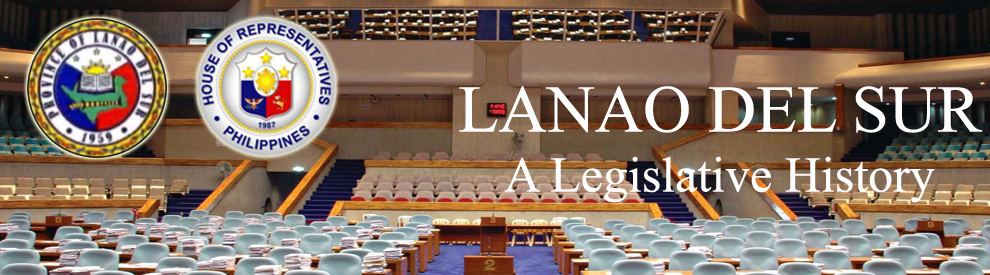
<style>
.page{position:relative;width:990px;height:275px}
.page>*{position:absolute;margin:0}
.t1{font:50px "TimesNewRomanPSMT";color:#fdfcfc}
.t2{font:66.7px "TimesNewRomanPSMT";color:#fdfdfd}
</style>
<div class="page">
<p class="t1" style="left:459px;top:86px;width:524px;height:117px;text-align:center"><span class="t2">LANAO DEL SUR<br></span>A Legislative History</p>
</div>
